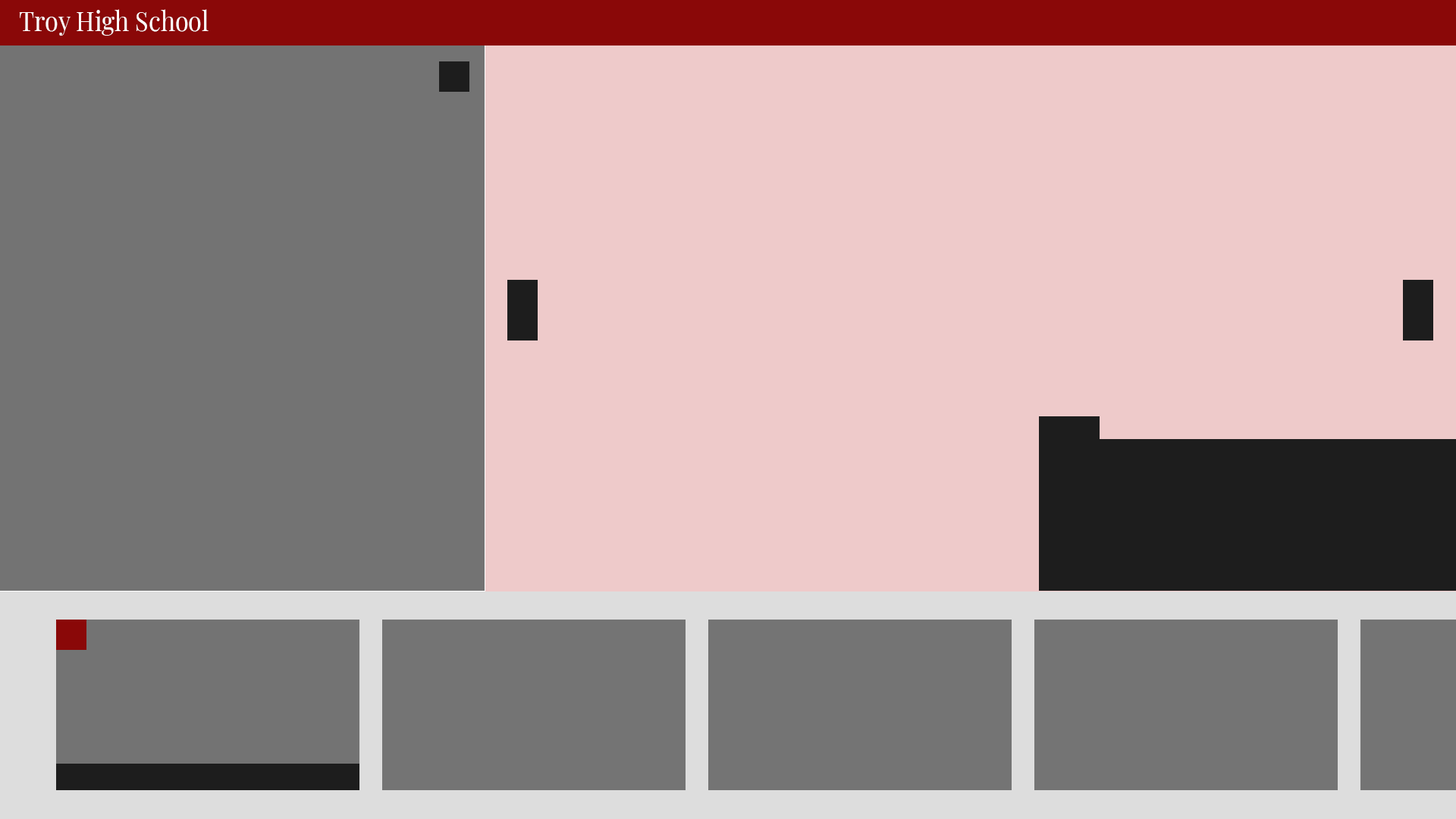
<style>
.page{position:relative;width:1456px;height:819px;background:#eecaca}
.page>*{position:absolute;margin:0}
.t1{font:27.3px "PlayfairDisplay-Regular";color:#ffffff;scale:0.9 1}
</style>
<div class="page">
<p class="t1" style="left:19px;top:9px;width:190px;height:27px">Troy High School</p>
</div>
